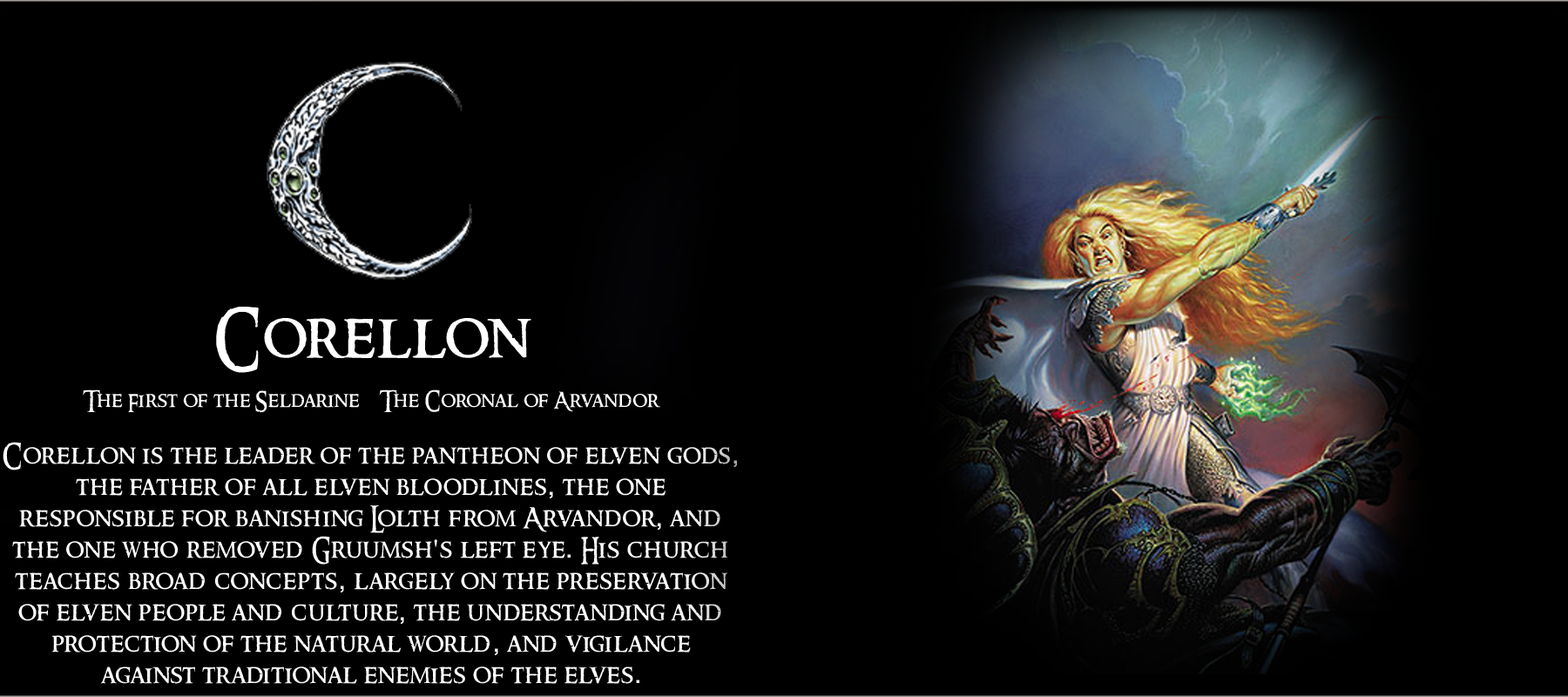
<style>
.page{position:relative;width:1568px;height:697px;background:#000000}
.page>*{position:absolute;margin:0}
.t1{font:26.1px "RingbearerMedium";letter-spacing:0.025em;color:#ffffff}
.t2{font:62.7px "RingbearerMedium";letter-spacing:0.025em;color:#ffffff}
.t3{font:20.9px "RingbearerMedium";letter-spacing:0.025em;color:#ffffff}
.t4{font:26.1px "Rockwell";letter-spacing:0.025em;color:#ffffff}
</style>
<div class="page">
<p class="t1" style="left:3px;top:307px;width:734px;height:377px;text-align:center"><span class="t2">Corellon<br></span><span class="t3"><br>The First of the Seldarine    The Coronal of Arvandor<br><br></span>Corellon is the leader of the pantheon of elven gods<span class="t4">,</span> the father of all elven bloodlines<span class="t4">,</span> the one <br>responsible for banishing Lolth from Arvandor<span class="t4">,</span> and the one who removed Gruumsh<span class="t4">'</span>s left eye<span class="t4">.</span> His church teaches broad concepts<span class="t4">,</span> largely on the preservation of elven people and culture<span class="t4">,</span> the understanding and <br>protection of the natural world<span class="t4">,</span> and vigilance <br>against traditional enemies of the elves<span class="t4">.</span></p>
</div>
